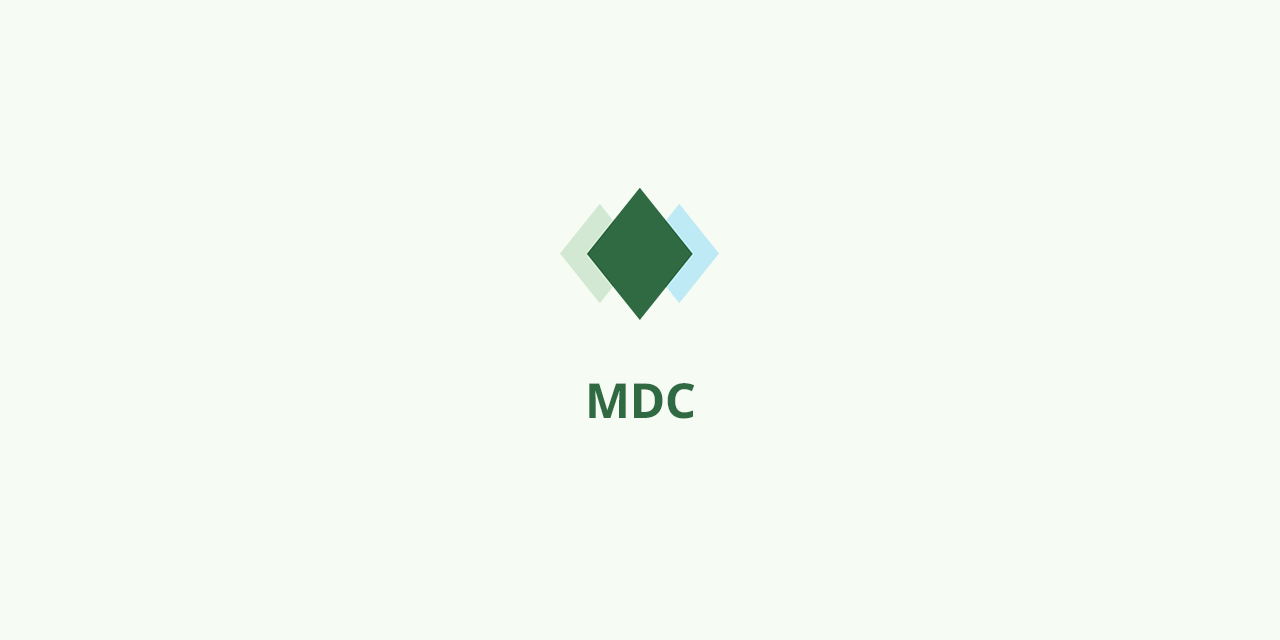
<style>
.page{position:relative;width:1280px;height:640px;background:#f6fbf3}
.page>*{position:absolute;margin:0}
.t1{font:48.2px "NotoSans-Bold";color:#306a43}
</style>
<div class="page">
<p class="t1" style="left:589px;top:383px;width:106px;height:36px">MDC</p>
</div>
